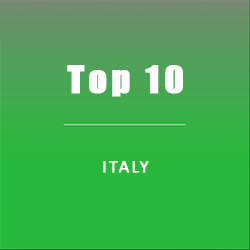
<style>
.page{position:relative;width:250px;height:250px;background:#28b93c}
.page>*{position:absolute;margin:0}
.t1{font:36px "Impact";letter-spacing:0.1em;color:#ffffff;font-weight:bold}
.t2{font:18px "Calibri";letter-spacing:0.1em;color:#ffffff;text-transform:uppercase;font-weight:bold}
</style>
<div class="page">
<p class="t1" style="left:67px;top:65px;width:116px;height:32px">Top 10</p>
<p class="t1" style="left:67px;top:65px;width:116px;height:32px">Top 10</p>
<p class="t1" style="left:67px;top:65px;width:116px;height:32px">Top 10</p>
<p class="t1" style="left:67px;top:65px;width:116px;height:32px">Top 10</p>
<p class="t2" style="left:103px;top:161px;width:46px;height:12px">italy</p>
</div>
